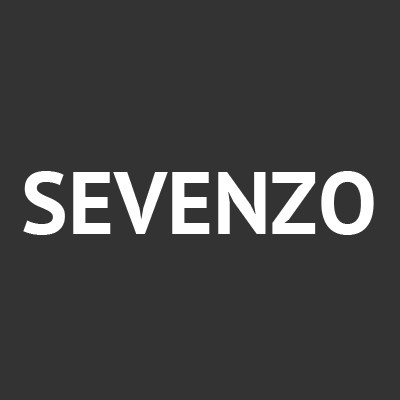
<style>
.page{position:relative;width:400px;height:400px;background:#333333}
.page>*{position:absolute;margin:0}
.t1{font:88px "PTSans-Bold";color:#ffffff}
</style>
<div class="page">
<p class="t1" style="left:23px;top:171px;width:351px;height:64px">SEVENZO</p>
</div>
